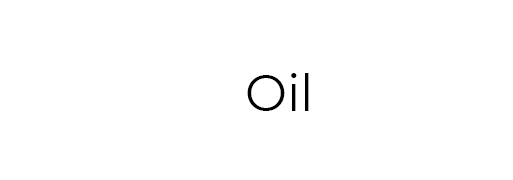
<style>
.page{position:relative;width:513px;height:180px;background:#ffffff}
.page>*{position:absolute;margin:0}
.t1{font:50px "Montserrat-Regular";color:#000000}
</style>
<div class="page">
<p class="t1" style="left:247px;top:73px;width:62px;height:38px">Oil</p>
</div>
